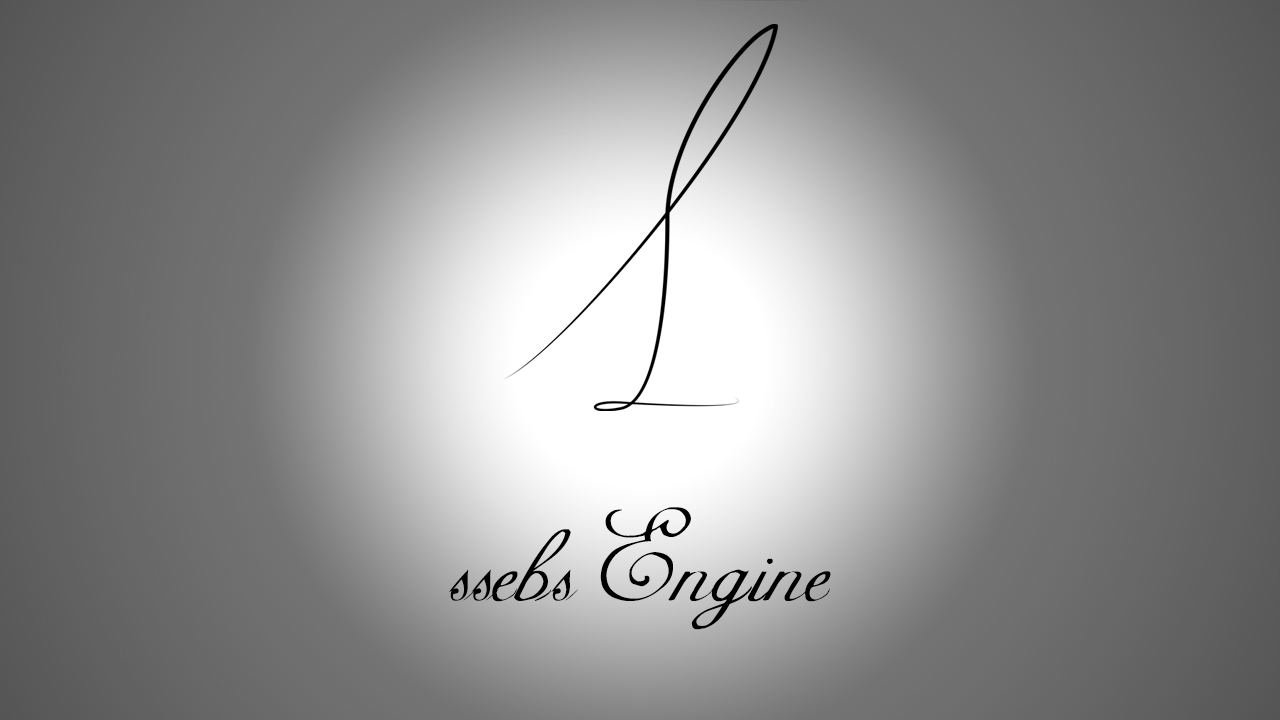
<style>
.page{position:relative;width:1280px;height:720px}
.page>*{position:absolute;margin:0}
.t1{font:150px "AdineKirnberg-Regular";color:#000000}
</style>
<div class="page">
<p class="t1" style="left:449px;top:507px;width:382px;height:123px">ssebs Engine</p>
</div>
